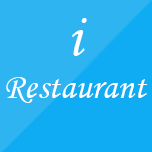
<style>
.page{position:relative;width:152px;height:152px;background:#2db4f1}
.page>*{position:absolute;margin:0}
.t1{font:36px "MonotypeCorsiva";color:#ffffff}
.t2{font:60px "MonotypeCorsiva";color:#ffffff}
</style>
<div class="page">
<p class="t1" style="left:6px;top:18px;width:142px;height:85px;text-align:center"><span class="t2">i<br></span>Restaurant</p>
</div>
